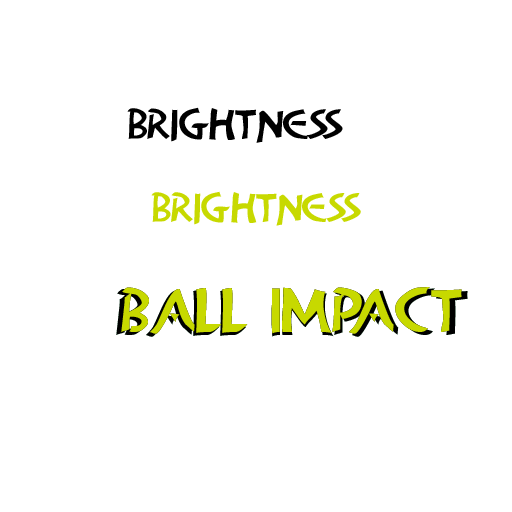
<style>
.page{position:relative;width:512px;height:512px;background:#ffffff}
.page>*{position:absolute;margin:0}
.t1{font:41.2px "AlanDen";color:#000000}
.t2{font:40px "AlanDen";color:#c7d900}
</style>
<div class="page">
<p class="t1" style="left:127px;top:107px;width:216px;height:36px">brightness</p>
<p class="t2" style="left:151px;top:191px;width:210px;height:35px">brightness</p>
</div>
